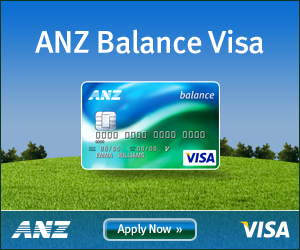
<style>
.page{position:relative;width:300px;height:250px}
.page>*{position:absolute;margin:0}
.t1{font:32px "MetaMediumLF-Roman";letter-spacing:-0.01em;color:#ffffff}
.t2{font:12.5px "MetaMediumLF-Roman";letter-spacing:-0.025em;color:#ffffff}
.t3{font:12.5px "MetaMediumLF-Roman";letter-spacing:-0.01em;color:#ffffff}
</style>
<div class="page">
<p class="t1" style="left:35px;top:29px;width:229px;height:25px">ANZ Balance Visa</p>
<p class="t2" style="left:117px;top:223px;width:65px;height:13px">Apply Now  <span class="t3">»</span></p>
</div>
